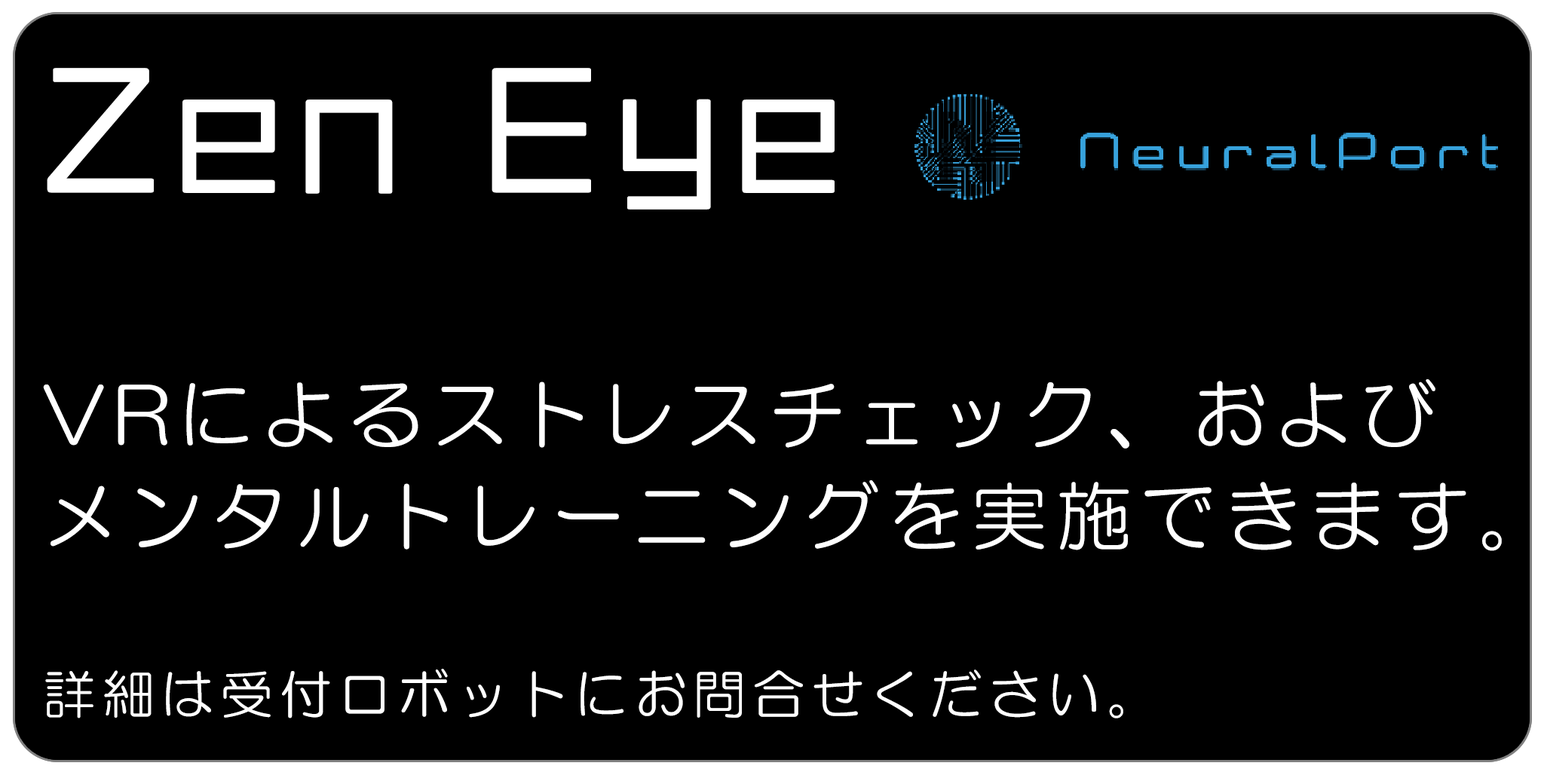
<style>
.page{position:relative;width:1544px;height:772px;background:#000000}
.page>*{position:absolute;margin:0}
.t1{font:149px "VDL-LineGR-Regular";letter-spacing:0.12em;color:#ffffff}
.t2{font:75.4px/101.8px "HGMaruGothicMPRO";letter-spacing:0.12em;color:#ffffff}
.t3{font:52.8px/101.8px "HGMaruGothicMPRO";letter-spacing:0.12em;color:#ffffff}
</style>
<div class="page">
<p class="t1" style="left:47px;top:68px;width:788px;height:142px">Zen Eye</p>
<p class="t2" style="left:43px;top:379px;width:1459px;height:340px">VRによるストレスチェック、および<br>メンタルトレーニングを実施できます。<br><br><span class="t3">詳細は受付ロボットにお問合せください。</span></p>
</div>
